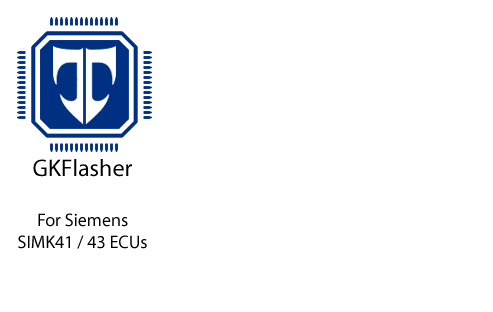
<style>
.page{position:relative;width:493px;height:312px;background:#ffffff}
.page>*{position:absolute;margin:0}
.t1{font:18px "MyriadPro-Regular";color:#000000}
.t2{font:24px "MyriadPro-Regular";color:#000000}
</style>
<div class="page">
<p class="t1" style="left:18px;top:159px;width:129px;height:90px;text-align:center"><span class="t2">GKFlasher<br><br></span>For Siemens<br>SIMK41 / 43 ECUs</p>
</div>
